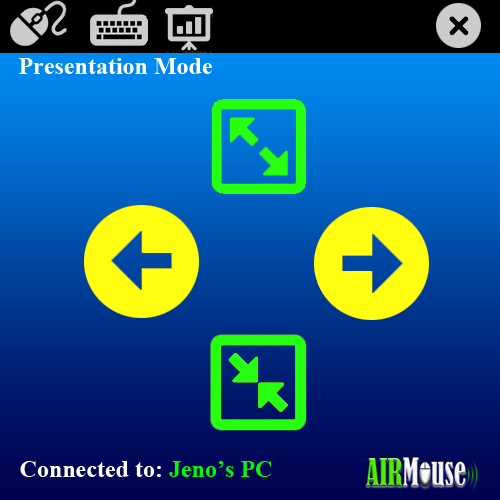
<style>
.page{position:relative;width:500px;height:500px}
.page>*{position:absolute;margin:0}
.t1{font:24px "TimesNewRomanPS-BoldMT";color:#ffffff}
.t2{font:24px "TimesNewRomanPS-BoldMT";color:#fefffe}
.t3{font:24px "TimesNewRomanPS-BoldMT";color:#07f60c}
</style>
<div class="page">
<p class="t1" style="left:19px;top:58px;width:193px;height:16px">Presentation Mode</p>
<p class="t2" style="left:20px;top:461px;width:251px;height:16px">Connected to:<span class="t3"> Jeno’s PC</span></p>
</div>
